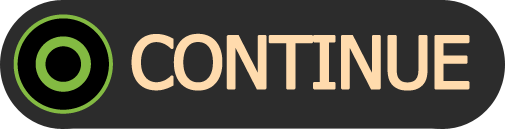
<style>
.page{position:relative;width:505px;height:129px;background:#2c2c2c}
.page>*{position:absolute;margin:0}
.t1{font:72px "Tahoma";letter-spacing:-0.04em;color:#ffdbad;font-weight:bold}
</style>
<div class="page">
<p class="t1" style="left:131px;top:33px;width:339px;height:58px">CONTINUE</p>
</div>
